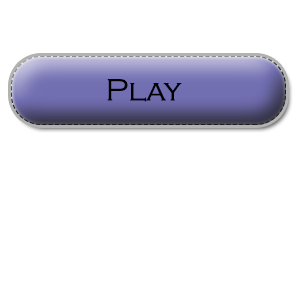
<style>
.page{position:relative;width:300px;height:300px;background:#ffffff}
.page>*{position:absolute;margin:0}
.t1{font:31.8px "CopperplateGothic-Light";color:#000000}
</style>
<div class="page">
<p class="t1" style="left:107px;top:79px;width:75px;height:23px">Play</p>
</div>
